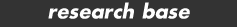
<style>
.page{position:relative;width:237px;height:27px;background:#333333}
.page>*{position:absolute;margin:0}
.t1{font:19.2px "Futura-Bold";color:#fefefe;font-style:italic}
</style>
<div class="page">
<p class="t1" style="left:48px;top:2px;width:142px;height:17px">research base</p>
</div>
